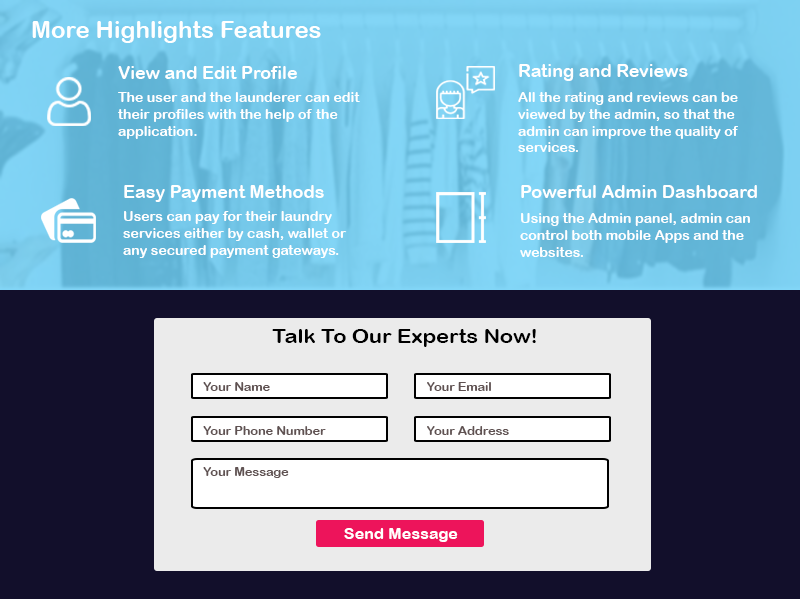
<style>
.page{position:relative;width:800px;height:600px;background:#120f2b}
.page>*{position:absolute;margin:0}
.t1{font:24px "ArialRoundedMTBold";color:#ffffff}
.t2{font:18px "ArialRoundedMTBold";color:#ffffff}
.t3{font:14px "ArialRoundedMTBold";color:#ffffff}
.t4{font:20.2px "ArialRoundedMTBold";color:#000000;scale:1.07 1}
.t5{font:11.8px "ArialRoundedMTBold";color:#605252;scale:1.07 1}
.t6{font:15.1px "ArialRoundedMTBold";color:#ffffff;scale:1.07 1}
</style>
<div class="page">
<p class="t1" style="left:32px;top:21px;width:289px;height:22px">More Highlights Features</p>
<p class="t2" style="left:519px;top:64px;width:169px;height:17px">Rating and Reviews</p>
<p class="t2" style="left:118px;top:66px;width:179px;height:13px">View and Edit Profile</p>
<p class="t3" style="left:118px;top:92px;width:242px;height:47px">The user and the launderer can edit <br>their profiles with the help of the <br>application.</p>
<p class="t3" style="left:518px;top:92px;width:220px;height:60px">All the rating and reviews can be<br>viewed by the admin, so that the<br>admin can improve the quality of<br>services.</p>
<p class="t2" style="left:124px;top:185px;width:200px;height:17px">Easy Payment Methods</p>
<p class="t2" style="left:521px;top:185px;width:236px;height:13px">Powerful Admin Dashboard</p>
<p class="t3" style="left:123px;top:211px;width:224px;height:47px">Users can pay for their laundry <br>services either by cash, wallet or<br>any secured payment gateways.</p>
<p class="t3" style="left:520px;top:213px;width:230px;height:44px">Using the Admin panel, admin can<br>control both mobile Apps and the<br>websites.</p>
<p class="t4" style="left:272px;top:329px;width:264px;height:18px">Talk To Our Experts Now!</p>
<p class="t5" style="left:203px;top:382px;width:67px;height:9px">Your Name</p>
<p class="t5" style="left:427px;top:382px;width:64px;height:9px">Your Email</p>
<p class="t5" style="left:203px;top:426px;width:123px;height:9px">Your Phone Number</p>
<p class="t5" style="left:427px;top:426px;width:82px;height:9px">Your Address</p>
<p class="t5" style="left:203px;top:467px;width:86px;height:11px">Your Message</p>
<p class="t6" style="left:344px;top:528px;width:114px;height:14px">Send Message</p>
</div>
